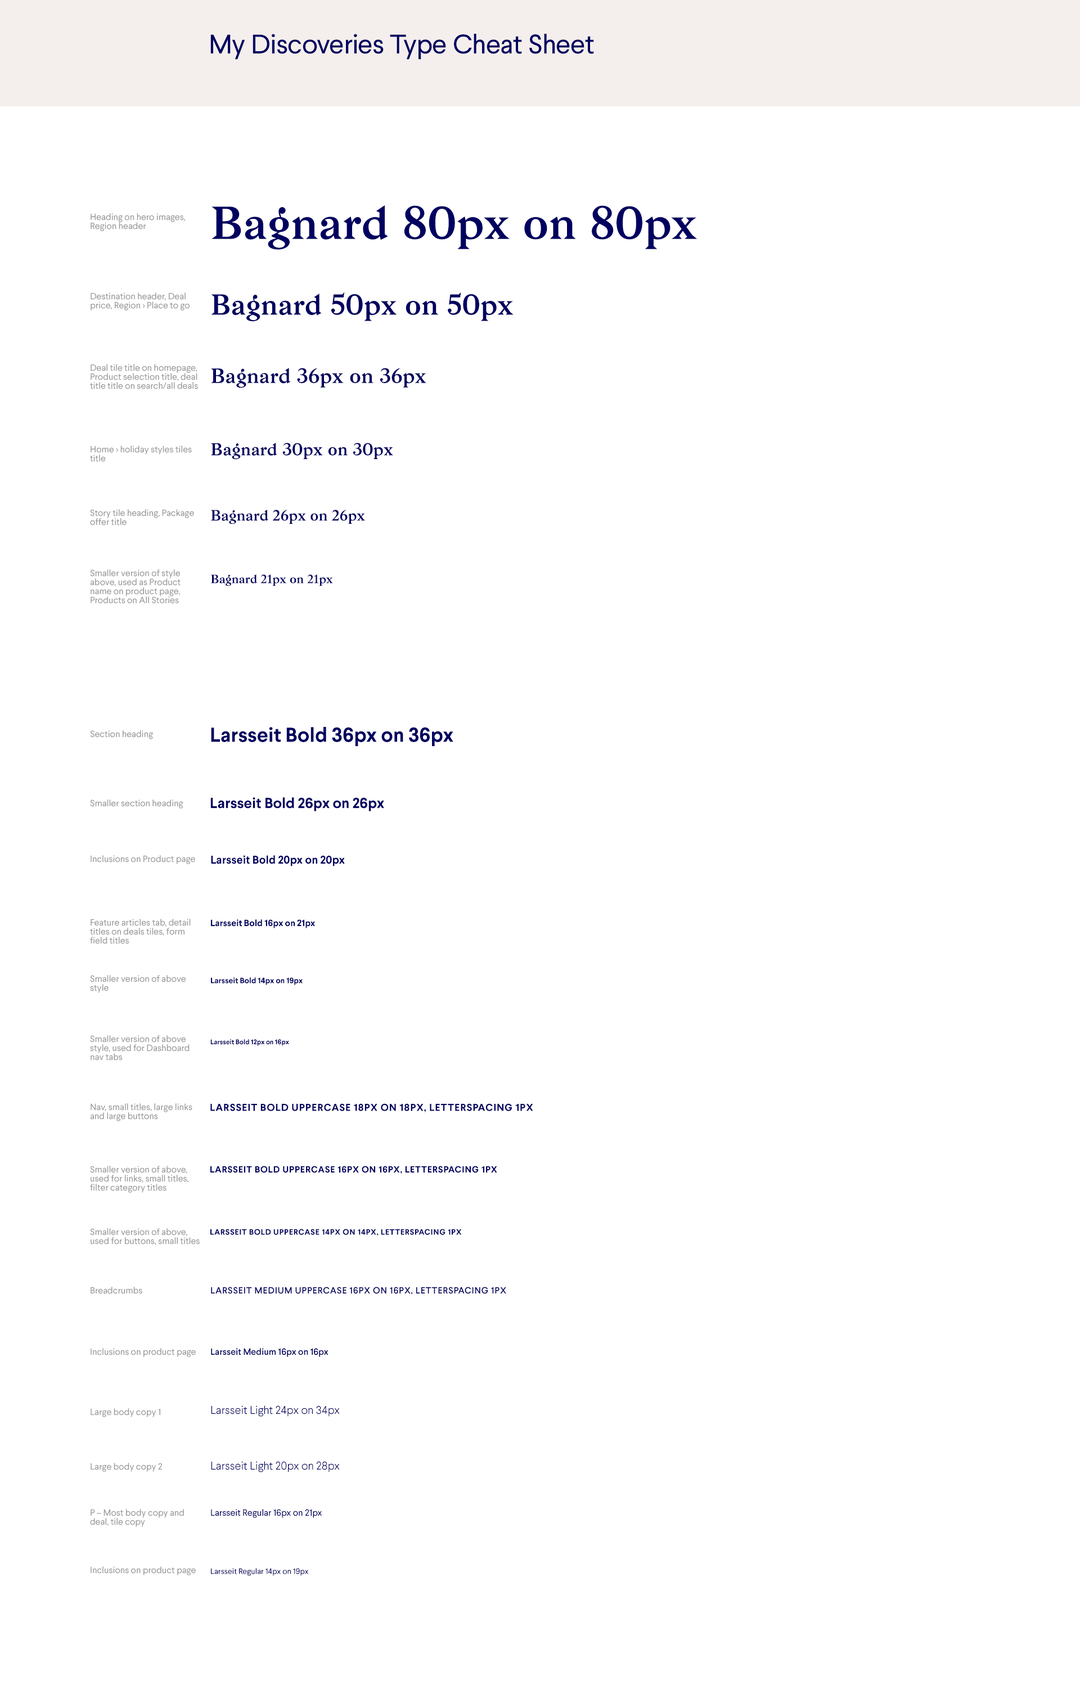
<style>
.page{position:relative;width:1080px;height:1707px;background:#ffffff}
.page>*{position:absolute;margin:0}
.t1{font:27px "Larsseit";color:#000060}
.t2{font:45px "Bagnard";color:#000060}
.t3{font:9px/9px "Larsseit";color:#999999}
.t4{font:28.1px "Bagnard";color:#000060}
.t5{font:20.2px "Bagnard";color:#000060}
.t6{font:16.9px "Bagnard";color:#000060}
.t7{font:14.6px "Bagnard";color:#000060}
.t8{font:11.8px "Bagnard";color:#000060}
.t9{font:9px "Larsseit";color:#999999}
.t10{font:20.2px "Larsseit-Bold";color:#000060}
.t11{font:14.6px "Larsseit-Bold";color:#000060}
.t12{font:11.2px "Larsseit-Bold";color:#000060}
.t13{font:9px "Larsseit-Bold";color:#000060}
.t14{font:7.9px "Larsseit-Bold";color:#000060}
.t15{font:6.7px "Larsseit-Bold";color:#000060}
.t16{font:10.1px "Larsseit-Bold";letter-spacing:0.05em;color:#000060;text-transform:uppercase}
.t17{font:9px "Larsseit-Bold";letter-spacing:0.05em;color:#000060;text-transform:uppercase}
.t18{font:7.9px "Larsseit-Bold";letter-spacing:0.05em;color:#000060;text-transform:uppercase}
.t19{font:9px "Larsseit-Medium";letter-spacing:0.05em;color:#000060;text-transform:uppercase}
.t20{font:9px "Larsseit-Medium";color:#000060}
.t21{font:11.2px "Larsseit-Light";color:#000060}
.t22{font:9px "Larsseit";color:#000060}
.t23{font:7.9px "Larsseit";color:#000060}
</style>
<div class="page">
<p class="t1" style="left:210px;top:34px;width:384px;height:26px">My Discoveries Type Cheat Sheet</p>
<p class="t2" style="left:212px;top:205px;width:486px;height:45px">Bagnard 80px on 80px</p>
<p class="t3" style="left:91px;top:213px;width:95px;height:18px">Heading on hero images,<br>Region header</p>
<p class="t3" style="left:91px;top:292px;width:99px;height:18px">Destination header, Deal price, Region &gt; Place to go</p>
<p class="t4" style="left:211px;top:292px;width:303px;height:29px">Bagnard 50px on 50px</p>
<p class="t3" style="left:90px;top:364px;width:108px;height:25px">Deal tile title on homepage, Product selection title, deal title title on search/all deals</p>
<p class="t5" style="left:211px;top:367px;width:215px;height:21px">Bagnard 36px on 36px</p>
<p class="t3" style="left:90px;top:446px;width:102px;height:16px">Home &gt; holiday styles tiles title</p>
<p class="t6" style="left:211px;top:442px;width:182px;height:18px">Bagnard 30px on 30px</p>
<p class="t3" style="left:90px;top:509px;width:104px;height:16px">Story tile heading, Package offer title</p>
<p class="t7" style="left:210px;top:509px;width:155px;height:15px">Bagnard 26px on 26px</p>
<p class="t3" style="left:90px;top:569px;width:91px;height:35px">Smaller version of style above, used as Product name on product page, Products on All Stories</p>
<p class="t8" style="left:210px;top:574px;width:123px;height:12px">Bagnard 21px on 21px</p>
<p class="t9" style="left:90px;top:730px;width:63px;height:9px">Section heading</p>
<p class="t10" style="left:211px;top:727px;width:242px;height:19px">Larsseit Bold 36px on 36px</p>
<p class="t11" style="left:210px;top:797px;width:174px;height:14px">Larsseit Bold 26px on 26px</p>
<p class="t9" style="left:90px;top:799px;width:93px;height:9px">Smaller section heading</p>
<p class="t9" style="left:91px;top:855px;width:104px;height:9px">Inclusions on Product page</p>
<p class="t12" style="left:211px;top:855px;width:134px;height:11px">Larsseit Bold 20px on 20px</p>
<p class="t3" style="left:90px;top:919px;width:101px;height:25px">Feature articles tab, detail titles on deals tiles, form field titles</p>
<p class="t13" style="left:211px;top:919px;width:104px;height:9px">Larsseit Bold 16px on 21px</p>
<p class="t3" style="left:90px;top:975px;width:96px;height:18px">Smaller version of above style</p>
<p class="t14" style="left:211px;top:977px;width:92px;height:8px">Larsseit Bold 14px on 19px</p>
<p class="t3" style="left:90px;top:1035px;width:100px;height:25px">Smaller version of above style, used for Dashboard nav tabs</p>
<p class="t15" style="left:210px;top:1039px;width:79px;height:7px">Larsseit Bold 12px on 16px</p>
<p class="t3" style="left:90px;top:1103px;width:102px;height:18px">Nav, small titles, large links and large buttons</p>
<p class="t16" style="left:210px;top:1103px;width:323px;height:9px">larsseit bold uppercase 18px on 18px, letterspacing 1px</p>
<p class="t3" style="left:90px;top:1166px;width:98px;height:26px">Smaller version of above, used for links, small titles, filter category titles</p>
<p class="t17" style="left:210px;top:1166px;width:287px;height:7px">larsseit bold uppercase 16px on 16px, letterspacing 1px</p>
<p class="t3" style="left:90px;top:1228px;width:110px;height:17px">Smaller version of above, used for buttons, small titles</p>
<p class="t18" style="left:210px;top:1228px;width:252px;height:8px">larsseit bold uppercase 14px on 14px, letterspacing 1px</p>
<p class="t9" style="left:91px;top:1286px;width:51px;height:8px">Breadcrumbs</p>
<p class="t19" style="left:211px;top:1286px;width:295px;height:8px">Larsseit Medium uppercase 16px on 16px, letterspacing 1px</p>
<p class="t9" style="left:91px;top:1348px;width:105px;height:9px">Inclusions on product page</p>
<p class="t20" style="left:211px;top:1348px;width:117px;height:9px">Larsseit Medium 16px on 16px</p>
<p class="t9" style="left:91px;top:1408px;width:69px;height:9px">Large body copy 1</p>
<p class="t21" style="left:211px;top:1405px;width:129px;height:11px">Larsseit Light 24px on 34px</p>
<p class="t9" style="left:91px;top:1462px;width:71px;height:10px">Large body copy 2</p>
<p class="t21" style="left:211px;top:1461px;width:129px;height:11px">Larsseit Light 20px on 28px</p>
<p class="t3" style="left:90px;top:1509px;width:94px;height:18px">P – Most body copy and deal, tile copy</p>
<p class="t22" style="left:211px;top:1509px;width:111px;height:9px">Larsseit Regular 16px on 21px</p>
<p class="t9" style="left:91px;top:1566px;width:105px;height:9px">Inclusions on product page</p>
<p class="t23" style="left:211px;top:1568px;width:98px;height:8px">Larsseit Regular 14px on 19px</p>
</div>
